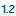
<style>
.page{position:relative;width:16px;height:16px;background:#ffffff}
.page>*{position:absolute;margin:0}
.t1{font:10px "Small Fonts";color:#005999}
</style>
<div class="page">
<p class="t1" style="left:1px;top:5px;width:14px;height:8px">1 .2</p>
</div>
